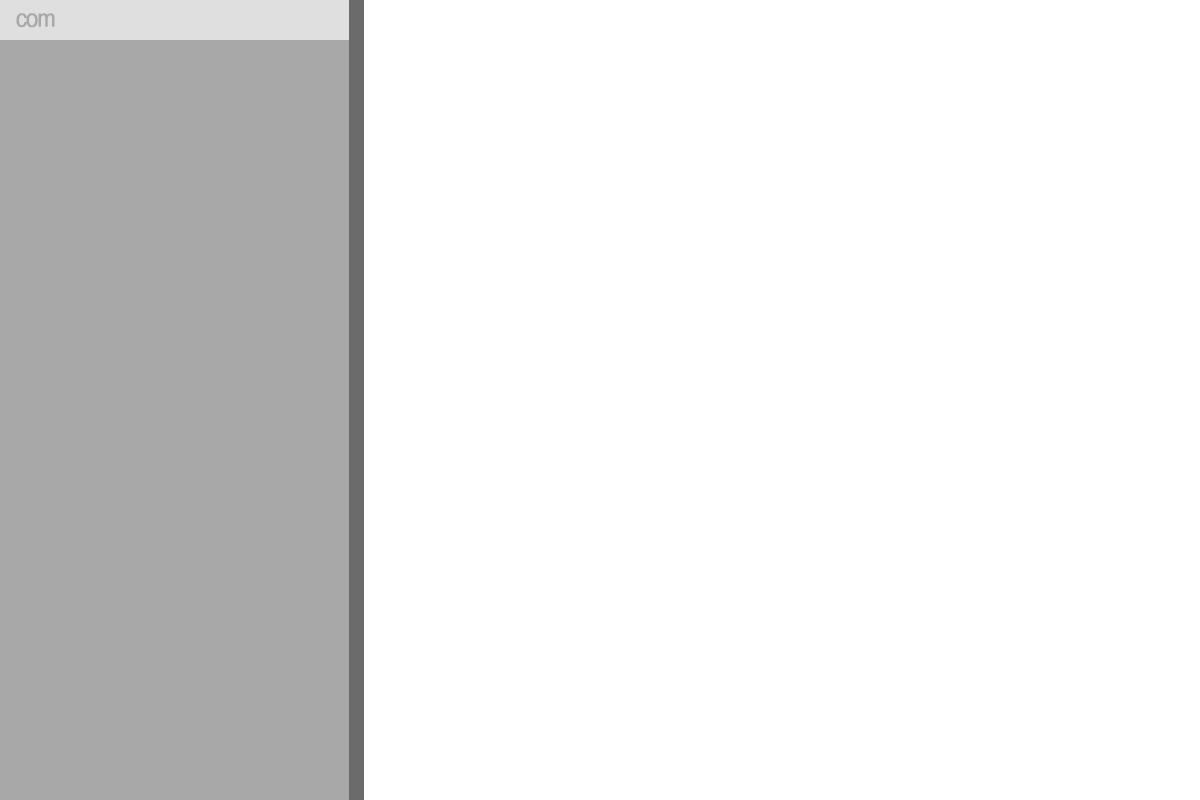
<style>
.page{position:relative;width:1200px;height:800px;background:#ffffff}
.page>*{position:absolute;margin:0}
.t1{font:24px "YGO540";letter-spacing:-0.075em;color:#a8a8a8}
</style>
<div class="page">
<p class="t1" style="left:16px;top:13px;width:39px;height:15px">com</p>
</div>
